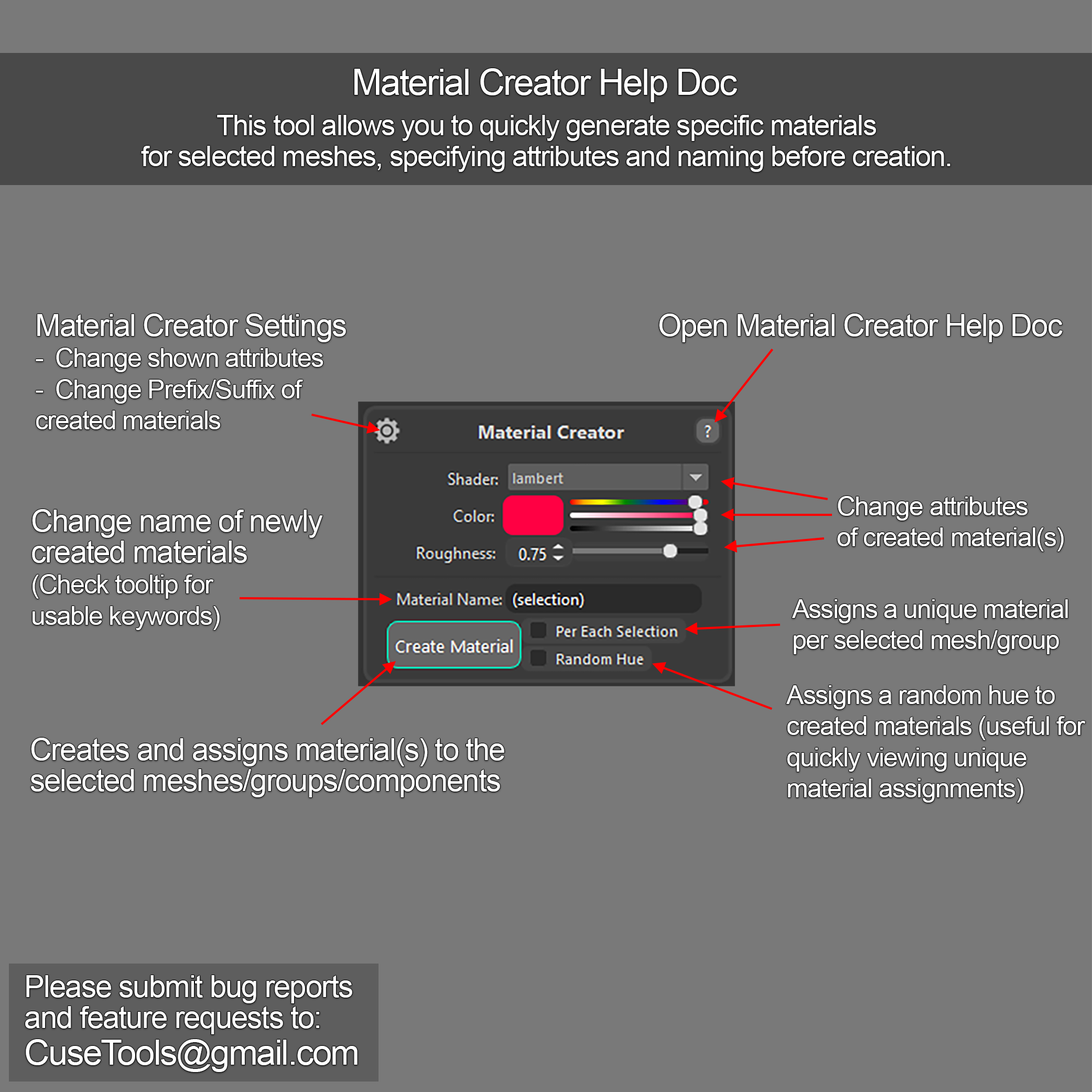
<style>
.page{position:relative;width:1092px;height:1092px;background:#797979}
.page>*{position:absolute;margin:0}
.t1{font:36px "ArialMT";letter-spacing:-0.036em;color:#ffffff}
.t2{font:28.4px/31px "ArialMT";letter-spacing:-0.036em;color:#ffffff}
.t3{font:26.2px/31px "ArialMT";letter-spacing:-0.036em;color:#ffffff}
.t4{font:30.6px/31px "ArialMT";letter-spacing:-0.036em;color:#ffffff}
.t5{font:30.6px "ArialMT";letter-spacing:-0.036em;color:#ffffff}
.t6{font:34.9px/37.1px "ArialMT";letter-spacing:-0.036em;color:#ffffff}
</style>
<div class="page">
<p class="t1" style="left:354px;top:68px;width:383px;height:34px">Material Creator Help Doc</p>
<p class="t2" style="left:141px;top:115px;width:809px;height:57px;text-align:center">This tool allows you to quickly generate specific materials <br>for selected meshes, specifying attributes and naming before creation.</p>
<p class="t3" style="left:36px;top:313px;width:310px;height:116px"><span class="t4">Material Creator Settings<br></span>Change shown attributes<br>Change Prefix/Suffix of<br>created materials</p>
<p class="t5" style="left:659px;top:313px;width:404px;height:29px">Open Material Creator Help Doc</p>
<p class="t3" style="left:837px;top:496px;width:227px;height:55px">Change attributes <br>of created material(s)</p>
<p class="t4" style="left:32px;top:509px;width:291px;height:121px">Change name of newly<br>created materials <br><span class="t3">(Check tooltip for <br>usable keywords)</span></p>
<p class="t3" style="left:792px;top:599px;width:276px;height:55px">Assigns a unique material <br>per selected mesh/group</p>
<p class="t3" style="left:786px;top:685px;width:300px;height:118px">Assigns a random hue to <br>created materials (useful for<br>quickly viewing unique<br>material assignments)</p>
<p class="t4" style="left:30px;top:738px;width:474px;height:59px">Creates and assigns material(s) to the <br>selected meshes/groups/components</p>
<p class="t4" style="left:25px;top:975px;width:333px;height:97px">Please submit bug reports<br>and feature requests to:<br><span class="t6">CuseTools@gmail.com</span></p>
</div>
